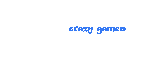
<style>
.page{position:relative;width:159px;height:60px;background:#ffffff}
.page>*{position:absolute;margin:0}
.t1{font:11px "MaturaMTScriptCapitals";color:#3579f4}
.t2{font:16px "MaturaMTScriptCapitals";color:#3579f4}
.t3{font:35px "MaturaMTScriptCapitals";color:#3579f4}
</style>
<div class="page">
<p class="t1" style="left:69px;top:26px;width:57px;height:8px"><span class="t2"> </span>crazy games <span class="t3"> gagames</span></p>
</div>
